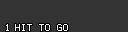
<style>
.page{position:relative;width:128px;height:32px;background:#333333}
.page>*{position:absolute;margin:0}
.t1{font:8px "Terminal";color:#ffffff}
</style>
<div class="page">
<p class="t1" style="left:6px;top:24px;width:3px;height:7px">1</p>
<p class="t1" style="left:15px;top:24px;width:53px;height:7px">HIT TO GO</p>
</div>
